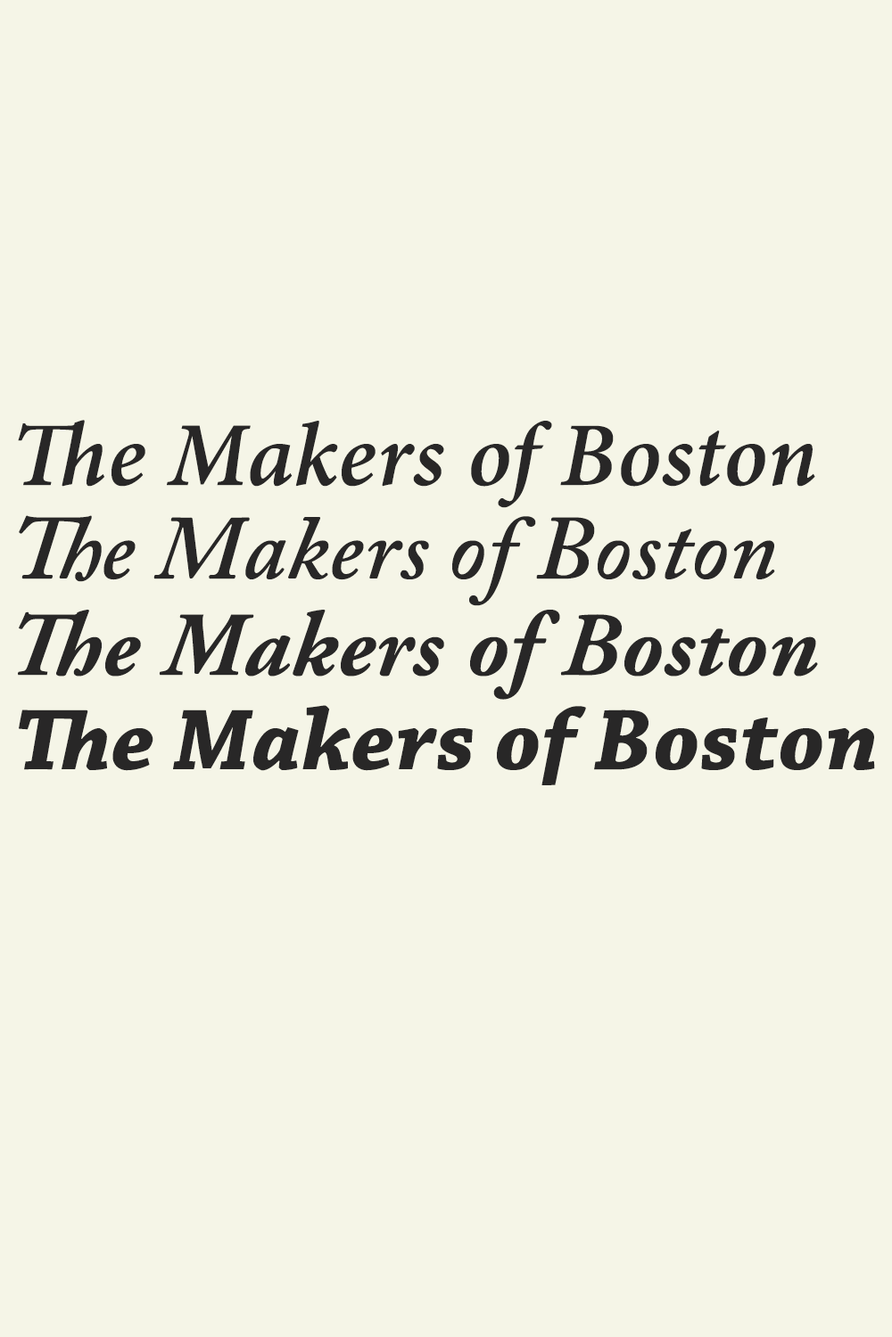
<style>
.page{position:relative;width:892px;height:1337px;background:#f5f5e7}
.page>*{position:absolute;margin:0}
.t1{font:90.9px "MinionPro-SemiboldIt";letter-spacing:0.013em;color:#282727}
.t2{font:90.9px "ACaslonPro-SemiboldItalic";letter-spacing:0.013em;color:#282727}
.t3{font:90.9px "AGaramondPro-BoldItalic";letter-spacing:0.013em;color:#282727}
.t4{font:90.9px "ChaparralPro-BoldIt";letter-spacing:0.013em;color:#282727}
</style>
<div class="page">
<p class="t1" style="left:18px;top:420px;width:797px;height:88px">The Makers of Boston</p>
<p class="t2" style="left:19px;top:515px;width:756px;height:91px">The Makers of Boston</p>
<p class="t3" style="left:18px;top:610px;width:800px;height:90px">The Makers of Boston</p>
<p class="t4" style="left:19px;top:705px;width:856px;height:81px">The Makers of Boston</p>
</div>
